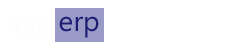
<style>
.page{position:relative;width:250px;height:50px;background:#ffffff}
.page>*{position:absolute;margin:0}
.t1{font:28px "SegoeUI";color:#1d1d74}
</style>
<div class="page">
<p class="t1" style="left:59px;top:16px;width:40px;height:22px">erp</p>
</div>
